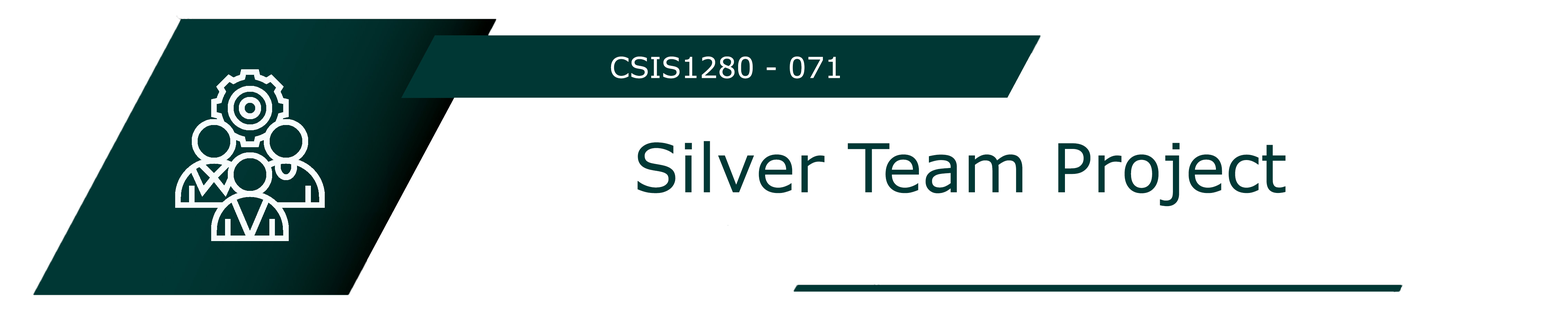
<style>
.page{position:relative;width:1568px;height:310px;background:#ffffff}
.page>*{position:absolute;margin:0}
.t1{font:28.9px "Verdana";color:#ffffff}
.t2{font:67.3px "Verdana";color:#003835}
</style>
<div class="page">
<p class="t1" style="left:611px;top:56px;width:229px;height:23px">CSIS1280 - 071</p>
<p class="t2" style="left:637px;top:141px;width:648px;height:65px">Silver Team Project</p>
</div>
